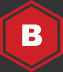
<style>
.page{position:relative;width:63px;height:72px;background:#cd2027}
.page>*{position:absolute;margin:0}
.t1{font:30px "Arial-Black";color:#ffffff}
</style>
<div class="page">
<p class="t1" style="left:22px;top:24px;width:20px;height:22px">B</p>
</div>
